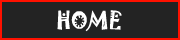
<style>
.page{position:relative;width:180px;height:40px;background:#232323}
.page>*{position:absolute;margin:0}
.t1{font:22px "Jokerman-Regular";color:#ffffff}
</style>
<div class="page">
<p class="t1" style="left:57px;top:10px;width:65px;height:22px">HOME</p>
</div>
